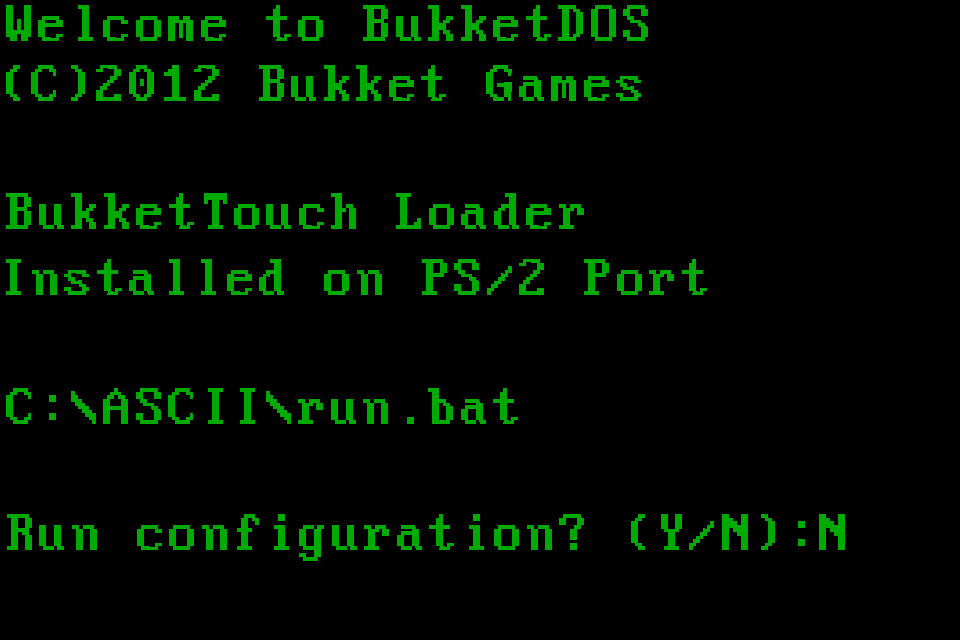
<style>
.page{position:relative;width:960px;height:640px;background:#000000}
.page>*{position:absolute;margin:0}
.t1{font:57.8px "PerfectDOSVGA437Win";color:#00aa00}
</style>
<div class="page">
<p class="t1" style="left:6px;top:5px;width:642px;height:36px">Welcome to BukketDOS</p>
<p class="t1" style="left:6px;top:65px;width:635px;height:36px">(C)2012 Bukket Games</p>
<p class="t1" style="left:6px;top:193px;width:578px;height:36px">BukketTouch Loader</p>
<p class="t1" style="left:6px;top:259px;width:701px;height:36px">Installed on PS/2 Port</p>
<p class="t1" style="left:6px;top:388px;width:512px;height:36px">C:\ASCII\run.bat</p>
<p class="t1" style="left:7px;top:514px;width:838px;height:47px">Run configuration? (Y/N):N</p>
</div>
